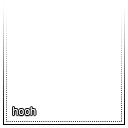
<style>
.page{position:relative;width:128px;height:128px;background:#ffffff}
.page>*{position:absolute;margin:0}
.t1{font:10.7px "Bahnschrift-SemiCondensed";color:#ffffff}
</style>
<div class="page">
<p class="t1" style="left:13px;top:107px;width:23px;height:8px">hooh</p>
</div>
